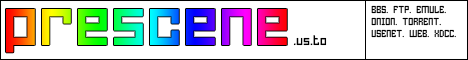
<style>
.page{position:relative;width:468px;height:60px;background:#ffffff}
.page>*{position:absolute;margin:0}
.t1{font:10px "HomespunTTBRK";color:#000000}
.t2{font:72px "HomespunTTBRK"}
.t3{font:14px "HomespunTTBRK";color:#000000}
</style>
<div class="page">
<p class="t1" style="left:371px;top:5px;width:85px;height:33px">BBS. FTP. EMULE.<br>ONION. TORRENT.<br>USENET. WEB. XDCC.</p>
<p class="t2" style="left:6px;top:9px;width:281px;height:44px">prescene</p>
<p class="t3" style="left:293px;top:35px;width:34px;height:11px">.us.to</p>
</div>
